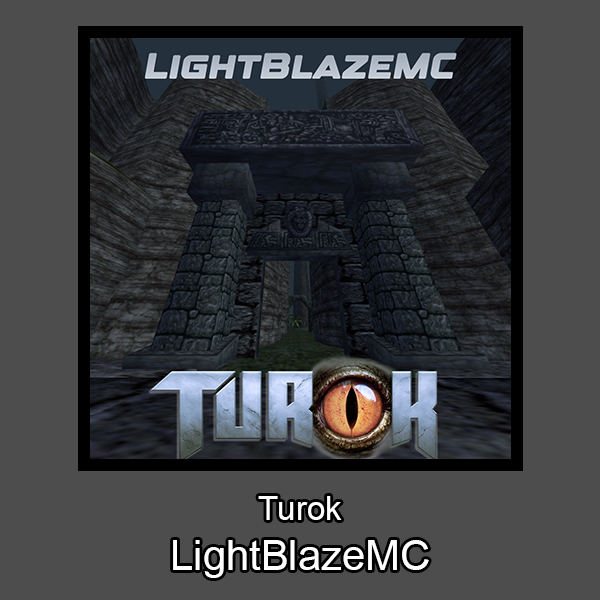
<style>
.page{position:relative;width:600px;height:600px;background:#4d4d4d}
.page>*{position:absolute;margin:0}
.t1{font:41.7px "ArialMT";color:#ffffff}
.t2{font:33.3px "ArialMT";color:#ffffff}
</style>
<div class="page">
<p class="t1" style="left:173px;top:496px;width:256px;height:82px;text-align:center"><span class="t2">Turok<br></span>LightBlazeMC</p>
</div>
